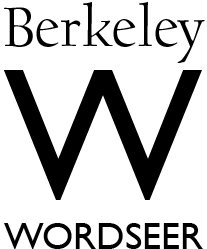
<style>
.page{position:relative;width:207px;height:249px;background:#ffffff}
.page>*{position:absolute;margin:0}
.t1{font:63px "UCBerkeleyOS";color:#000000}
.t2{font:190px "GillSans";color:#000000}
.t3{font:170px "GillSans";color:#000000}
.t4{font:166px "GillSans";color:#000000}
.t5{font:160px "GillSans";color:#000000}
.t6{font:38px "GillSans";color:#000000}
</style>
<div class="page">
<p class="t1" style="left:4px;top:2px;width:201px;height:61px">Berkeley</p>
<p class="t2" style="left:4px;top:70px;width:198px;height:130px">W<span class="t3">W</span><span class="t4">W</span><span class="t5">W</span></p>
<p class="t6" style="left:4px;top:223px;width:199px;height:26px">WORDSEER</p>
</div>
